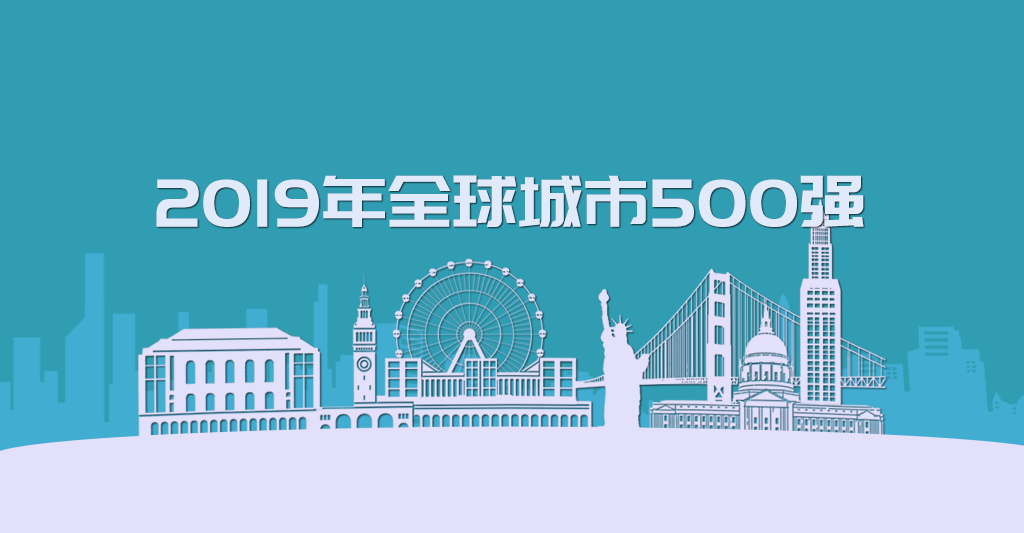
<style>
.page{position:relative;width:1024px;height:533px;background:#319db3}
.page>*{position:absolute;margin:0}
.t1{font:70.8px "PangMenZhengDao";color:#e0eafb}
</style>
<div class="page">
<p class="t1" style="left:156px;top:175px;width:708px;height:52px">2019年全球城市500强</p>
</div>
